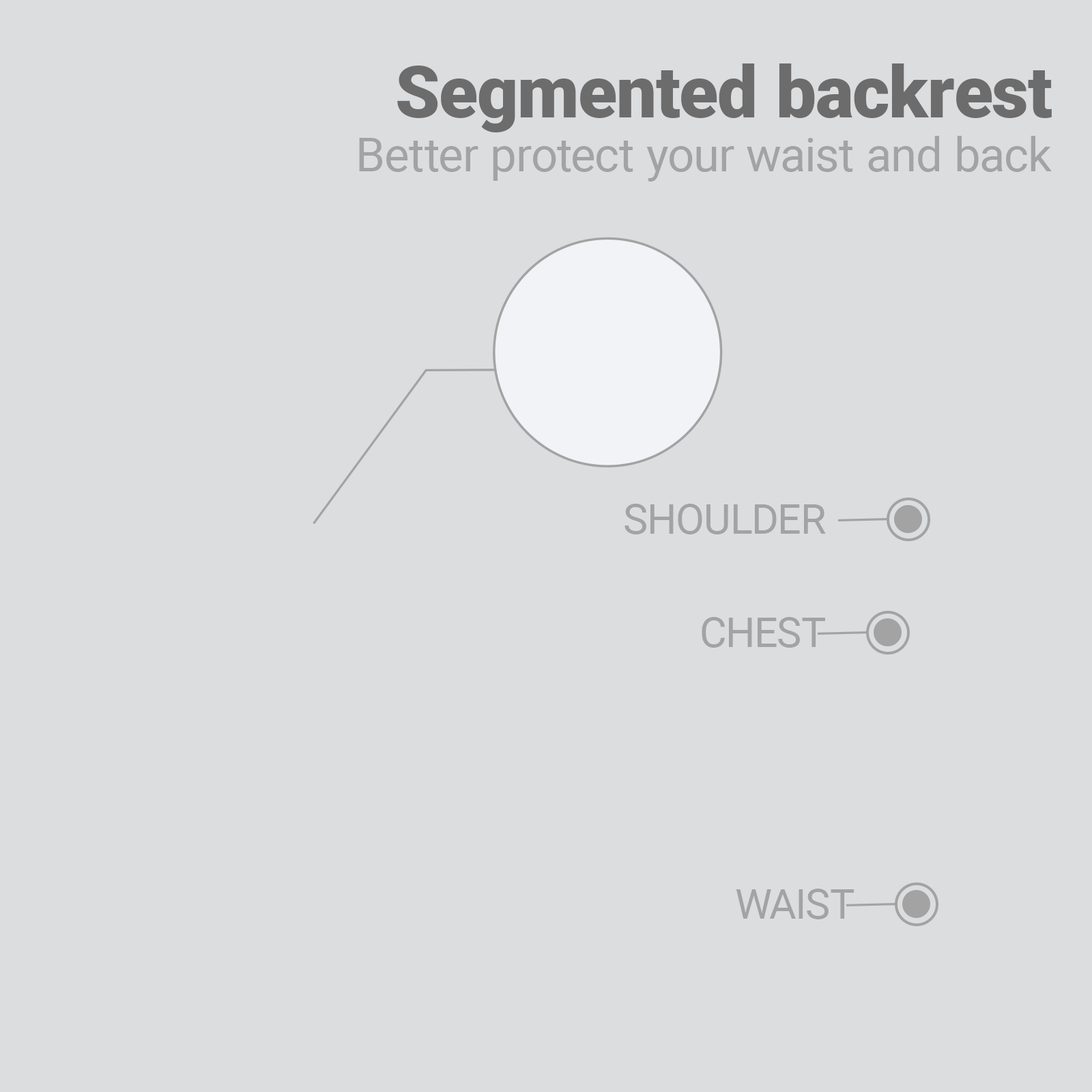
<style>
.page{position:relative;width:1092px;height:1092px;background:#dcdddf}
.page>*{position:absolute;margin:0}
.t1{font:71.9px "Roboto-Black";color:#6c6c6c}
.t2{font:47.3px "Roboto-Regular";color:#a3a3a3}
.t3{font:41.3px "Roboto-Regular";color:#a3a3a3}
</style>
<div class="page">
<p class="t1" style="left:397px;top:63px;width:655px;height:69px">Segmented backrest</p>
<p class="t2" style="left:359px;top:136px;width:693px;height:46px">Better protect your waist and back</p>
<p class="t3" style="left:624px;top:504px;width:202px;height:30px">SHOULDER</p>
<p class="t3" style="left:702px;top:617px;width:123px;height:31px">CHEST</p>
<p class="t3" style="left:736px;top:889px;width:118px;height:30px">WAIST</p>
</div>
